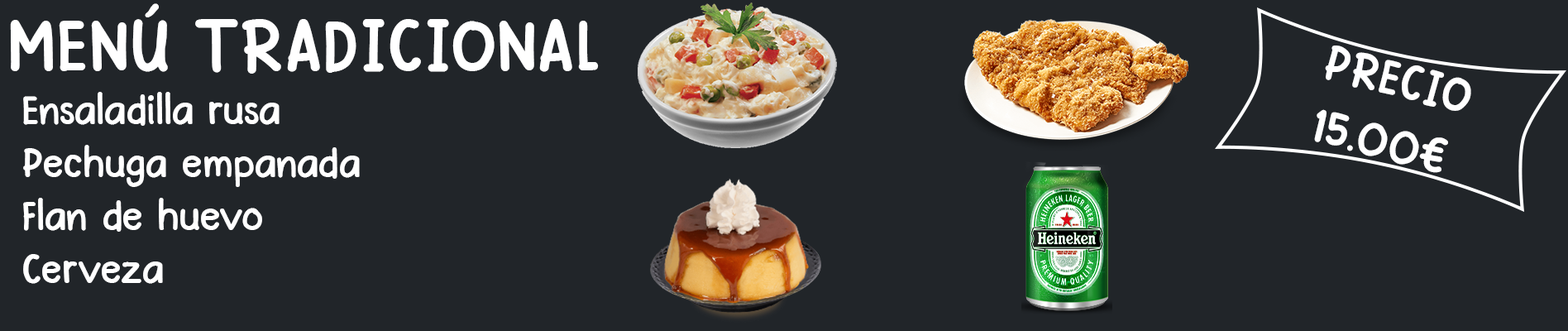
<style>
.page{position:relative;width:1568px;height:331px;background:#212529}
.page>*{position:absolute;margin:0}
.t1{font:79.4px "PinkChicken-Regular";color:#ffffff}
.t2{font:52.9px "PinkChicken-Regular";color:#ffffff}
.t3{font:44.1px "PinkChicken-Regular";color:#ffffff}
</style>
<div class="page">
<p class="t1" style="left:10px;top:3px;width:589px;height:71px">MENÚ TRADICIONAL</p>
<p class="t2" style="left:1314px;top:45px;width:157px;height:128px;text-align:center;rotate:15deg">PRECIO<br>15.00€</p>
<p class="t3" style="left:23px;top:92px;width:337px;height:192px">Ensaladilla rusa<br>Pechuga empanada<br>Flan de huevo<br>Cerveza</p>
</div>
